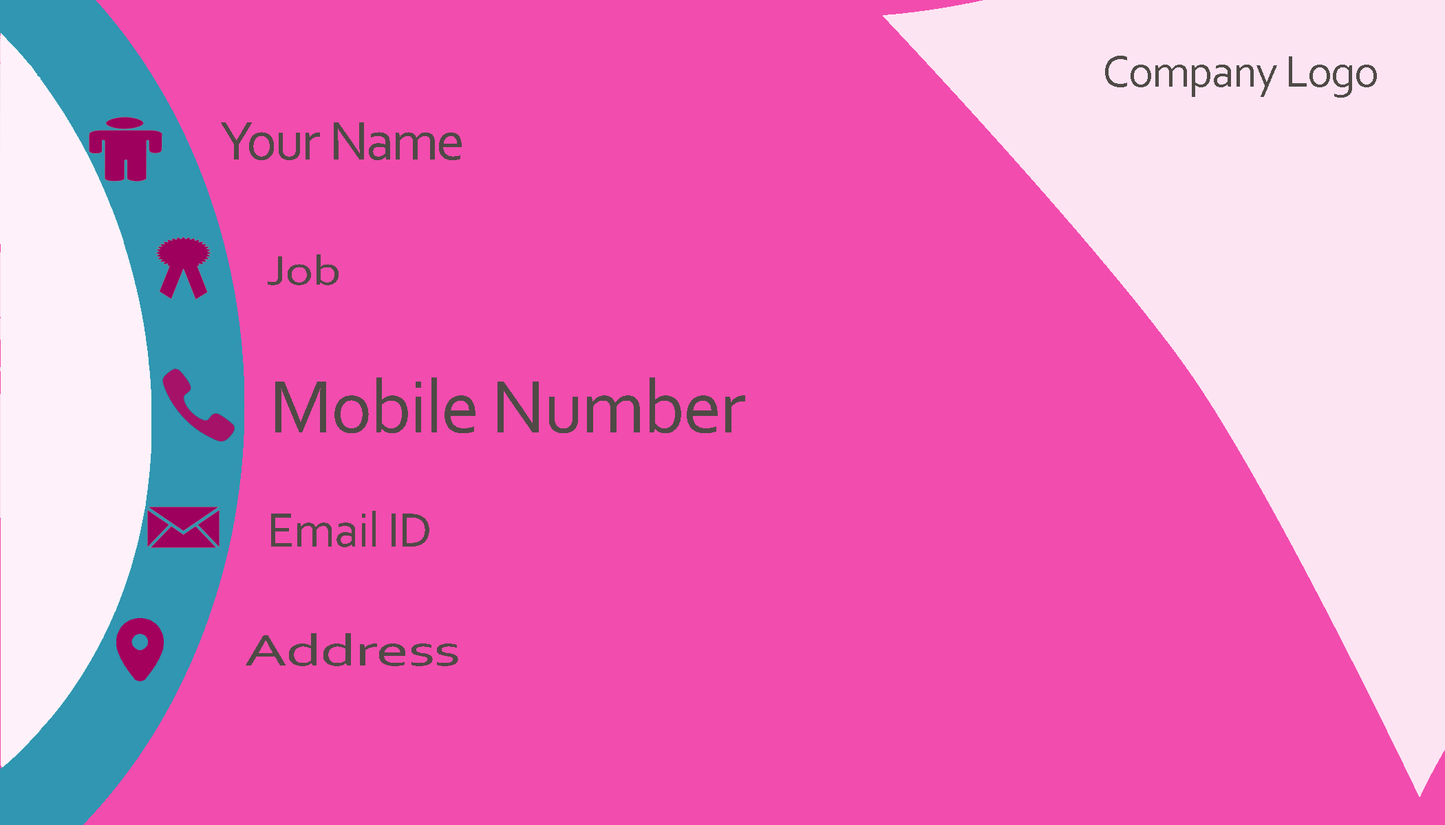
<style>
.page{position:relative;width:1445px;height:825px;background:#f24cae}
.page>*{position:absolute;margin:0}
.t1{font:45.9px "Corbel";letter-spacing:-0.025em;color:#4f4a46}
.t2{font:56.8px "Corbel";letter-spacing:-0.025em;color:#4f4a46}
.t3{font:42.6px "Corbel";letter-spacing:-0.025em;color:#4f4a46;scale:1.26 1}
.t4{font:77.4px "Corbel";letter-spacing:-0.025em;color:#4f4a46}
.t5{font:50.3px "Corbel";letter-spacing:-0.025em;color:#4f4a46}
.t6{font:45.8px "Corbel";letter-spacing:-0.025em;color:#4f4a46;scale:1.48 1}
</style>
<div class="page">
<p class="t1" style="left:1105px;top:56px;width:271px;height:42px">Company Logo</p>
<p class="t2" style="left:221px;top:122px;width:241px;height:38px">Your Name</p>
<p class="t3" style="left:268px;top:255px;width:70px;height:30px">Job</p>
<p class="t4" style="left:275px;top:378px;width:470px;height:55px">Mobile Number</p>
<p class="t5" style="left:271px;top:511px;width:158px;height:37px">Email ID</p>
<p class="t6" style="left:246px;top:634px;width:212px;height:33px">Address</p>
</div>
